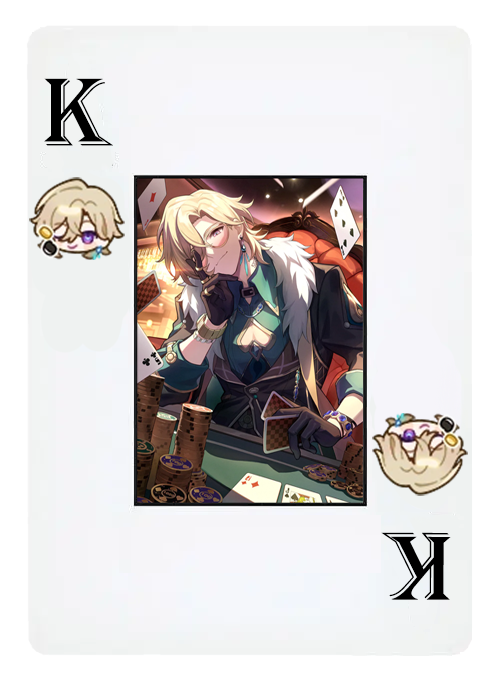
<style>
.page{position:relative;width:500px;height:679px}
.page>*{position:absolute;margin:0}
.t1{font:100px "Algerian";color:#000000}
</style>
<div class="page">
<p class="t1" style="left:44px;top:78px;width:69px;height:68px">K</p>
<p class="t1" style="left:381px;top:532px;width:70px;height:68px;rotate:-180deg">K</p>
</div>
